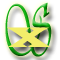
<style>
.page{position:relative;width:60px;height:60px}
.page>*{position:absolute;margin:0}
.t1{font:76.5px "Vivaldii";scale:0.55 1}
.t2{font:29px "LatinWide";color:#f2ed6a}
</style>
<div class="page">
<p class="t1" style="left:5px;top:2px;width:47px;height:55px">S</p>
<p class="t2" style="left:7px;top:27px;width:44px;height:20px">X</p>
</div>
